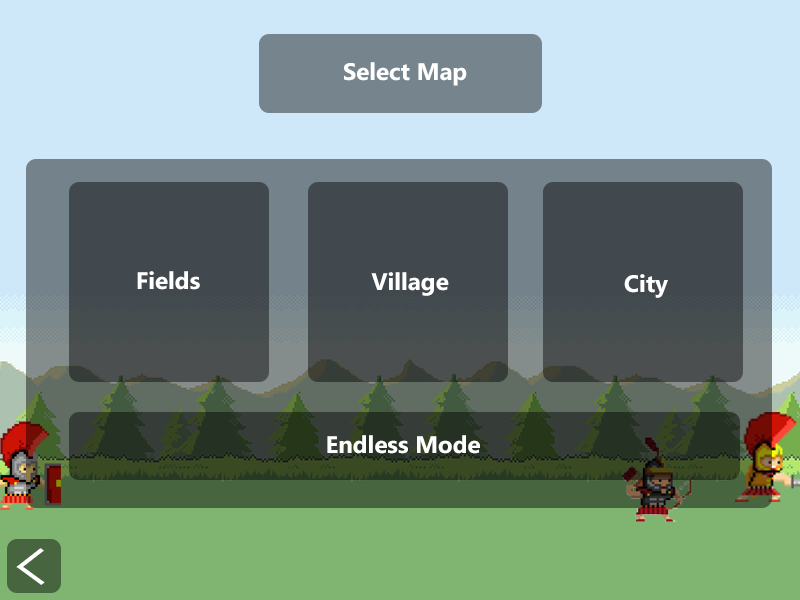
<style>
.page{position:relative;width:800px;height:600px;background:#cee7f9}
.page>*{position:absolute;margin:0}
.t1{font:24px "SegoeUI-Bold";color:#ffffff}
</style>
<div class="page">
<p class="t1" style="left:344px;top:62px;width:123px;height:24px">Select Map</p>
<p class="t1" style="left:137px;top:271px;width:63px;height:19px">Fields</p>
<p class="t1" style="left:371px;top:272px;width:78px;height:24px">Village</p>
<p class="t1" style="left:624px;top:274px;width:44px;height:24px">City</p>
<p class="t1" style="left:327px;top:435px;width:153px;height:19px">Endless Mode</p>
</div>
